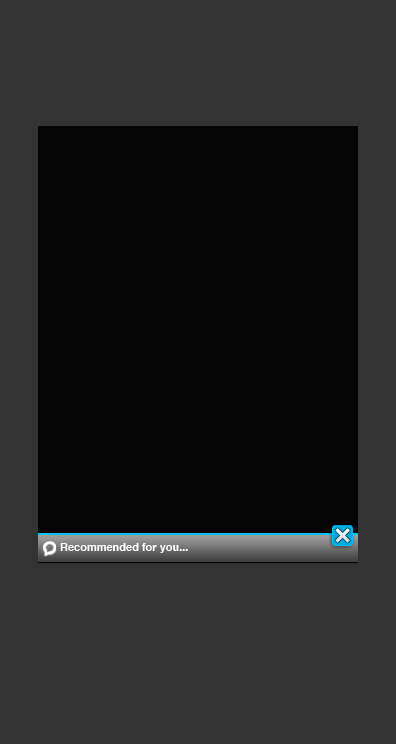
<style>
.page{position:relative;width:396px;height:744px;background:#333333}
.page>*{position:absolute;margin:0}
.t1{font:11px "Helvetica-Bold";color:#ffffff}
</style>
<div class="page">
<p class="t1" style="left:60px;top:543px;width:128px;height:10px">Recommended for you...</p>
</div>
